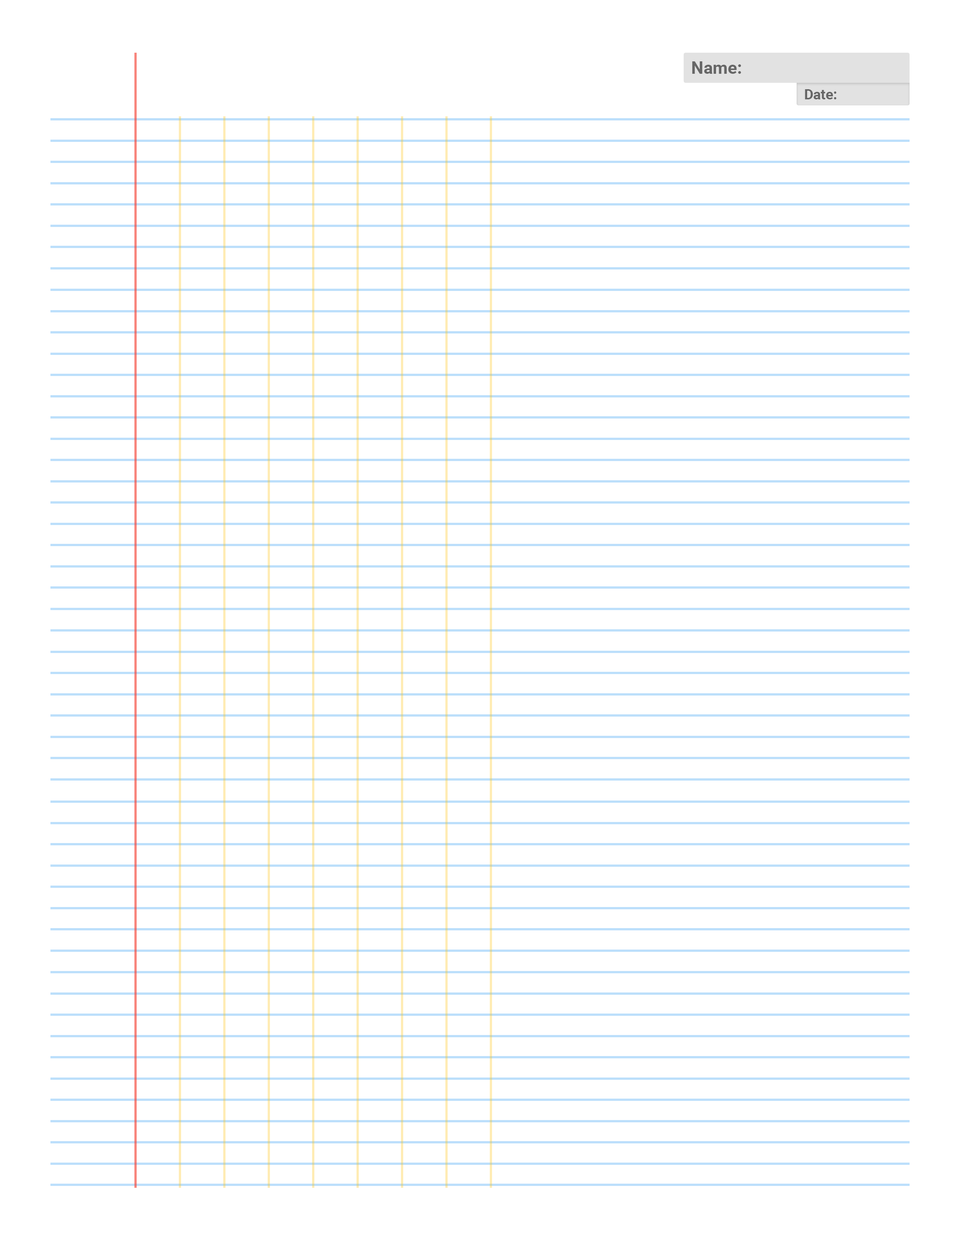
<style>
.page{position:relative;width:960px;height:1242px;background:#ffffff}
.page>*{position:absolute;margin:0}
.t1{font:17.3px "Roboto-Bold";color:#666666}
.t2{font:14.1px "Roboto-Bold";color:#666666}
</style>
<div class="page">
<p class="t1" style="left:692px;top:61px;width:49px;height:13px">Name:</p>
<p class="t2" style="left:805px;top:89px;width:31px;height:10px">Date:</p>
</div>
